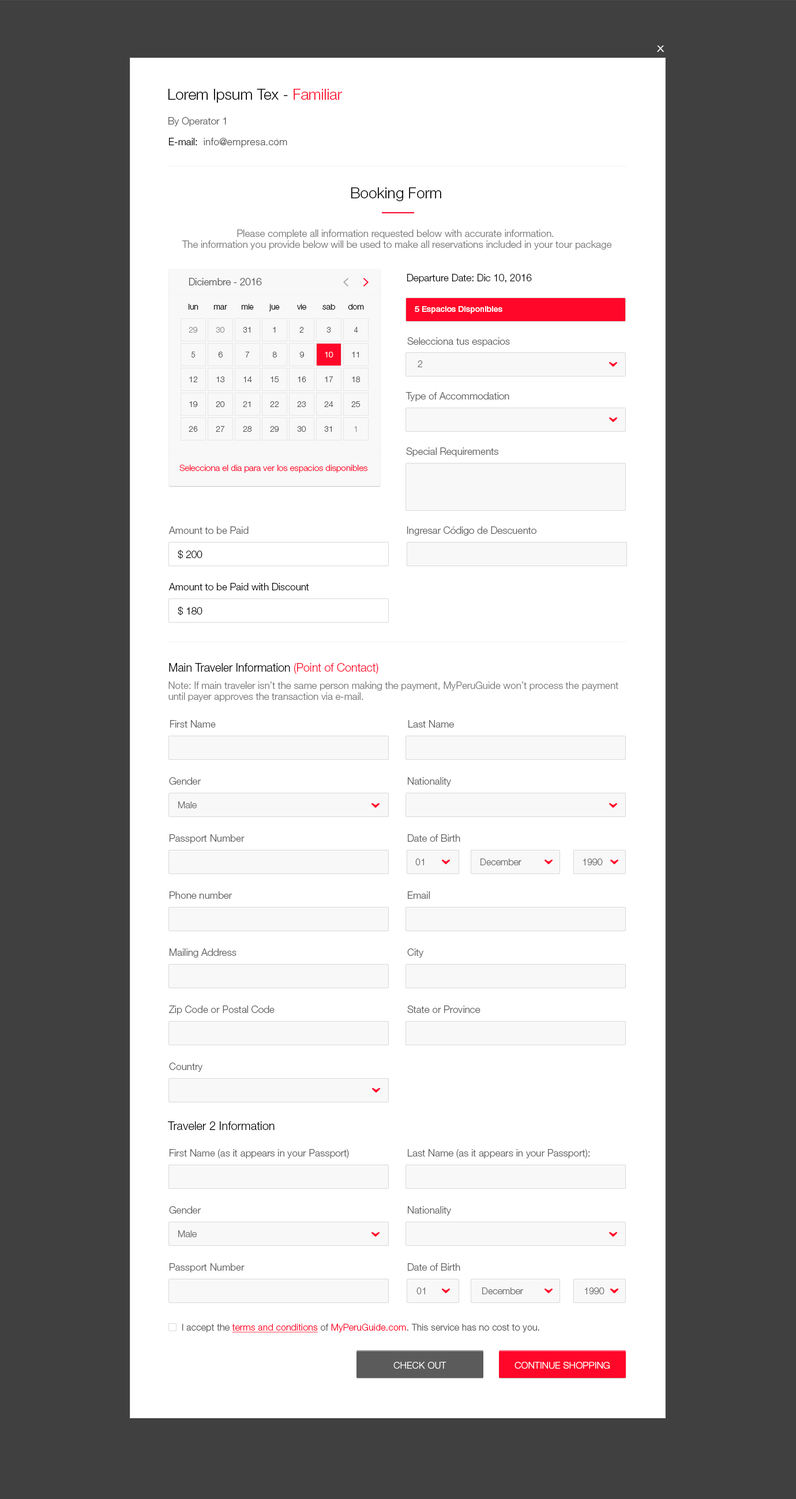
<style>
.page{position:relative;width:796px;height:1499px;background:#ffffff}
.page>*{position:absolute;margin:0}
.t1{font:12.1px "HelveticaNeueLTStd-Lt";color:#ffffff;scale:1.18 1}
.t2{font:15px "HelveticaNeueLTStd-Lt";color:#000000}
.t3{font:15px "HelveticaNeueLTStd-Lt";color:#ff0729}
.t4{font:9.8px "HelveticaNeueLTStd-Lt";color:#5b5b5b}
.t5{font:9.8px "HelveticaNeueLTStd-Lt";color:#000000}
.t6{font:9.8px "HelveticaLTStd-Light";color:#5b5b5b}
.t7{font:9.8px/11.2px "HelveticaNeueLTStd-Lt";color:#767676}
.t8{font:9.8px "HelveticaNeueLTStd-Lt";color:#525252}
.t9{font:8.1px "HelveticaNeueLTStd-Lt";color:#000000}
.t10{font:8.1px "HelveticaNeueLTStd-Md";color:#ffffff}
.t11{font:8.1px "HelveticaNeueLTStd-Lt";color:#909090}
.t12{font:8.1px "HelveticaNeueLTStd-Lt";color:#525252}
.t13{font:8.1px "HelveticaNeueLTStd-Lt";color:#ffffff}
.t14{font:9.2px "HelveticaNeueLTStd-Lt";color:#5b5b5b}
.t15{font:8.6px "HelveticaNeueLTStd-Lt";color:#ff0729}
.t16{font:11.5px "HelveticaNeueLTStd-Lt";color:#000000}
.t17{font:11.5px "HelveticaNeueLTStd-Lt";color:#ff0729}
.t18{font:9.9px/11px "HelveticaNeueLTStd-Lt";color:#767676}
.t19{font:9.2px "HelveticaNeueLTStd-Lt";letter-spacing:0.01em;color:#5b5b5b}
.t20{font:9.2px "HelveticaNeueLTStd-Lt";letter-spacing:0.01em;color:#ff0729;text-decoration:underline}
.t21{font:9.2px "HelveticaNeueLTStd-Lt";letter-spacing:0.01em;color:#ff0729}
.t22{font:9.2px "HelveticaNeueLTStd-Lt";letter-spacing:0.01em;color:#ffffff;text-transform:uppercase}
</style>
<div class="page">
<p class="t1" style="left:657px;top:46px;width:7px;height:6px">x</p>
<p class="t2" style="left:168px;top:89px;width:174px;height:14px">Lorem Ipsum Tex - <span class="t3">Familiar</span></p>
<p class="t4" style="left:168px;top:117px;width:58px;height:9px">By Operator 1</p>
<p class="t5" style="left:169px;top:138px;width:28px;height:7px">E-mail:</p>
<p class="t6" style="left:204px;top:138px;width:83px;height:10px">info@empresa.com</p>
<p class="t2" style="left:351px;top:187px;width:90px;height:14px">Booking Form</p>
<p class="t7" style="left:182px;top:229px;width:429px;height:21px;text-align:center">Please complete all information requested below with accurate information. <br>The information you provide below will be used to make all reservations included in your tour package</p>
<p class="t8" style="left:189px;top:278px;width:73px;height:7px">Diciembre - 2016</p>
<p class="t5" style="left:407px;top:274px;width:125px;height:9px">Departure Date: Dic 10, 2016</p>
<p class="t9" style="left:189px;top:304px;width:9px;height:6px">lun</p>
<p class="t9" style="left:214px;top:305px;width:13px;height:5px">mar</p>
<p class="t9" style="left:242px;top:304px;width:12px;height:6px">mie</p>
<p class="t9" style="left:269px;top:304px;width:11px;height:7px">jue</p>
<p class="t9" style="left:297px;top:304px;width:9px;height:6px">vie</p>
<p class="t9" style="left:322px;top:304px;width:13px;height:6px">sab</p>
<p class="t9" style="left:348px;top:304px;width:16px;height:6px">dom</p>
<p class="t10" style="left:414px;top:306px;width:88px;height:8px">5 Espacios Disponibles</p>
<p class="t11" style="left:189px;top:327px;width:9px;height:6px">29</p>
<p class="t11" style="left:216px;top:327px;width:9px;height:6px">30</p>
<p class="t12" style="left:243px;top:327px;width:7px;height:6px">31</p>
<p class="t12" style="left:273px;top:327px;width:3px;height:6px">1</p>
<p class="t12" style="left:299px;top:327px;width:5px;height:6px">2</p>
<p class="t12" style="left:326px;top:327px;width:5px;height:6px">3</p>
<p class="t12" style="left:354px;top:327px;width:4px;height:6px">4</p>
<p class="t4" style="left:407px;top:337px;width:103px;height:9px">Selecciona tus espacios</p>
<p class="t12" style="left:191px;top:352px;width:4px;height:5px">5</p>
<p class="t12" style="left:218px;top:352px;width:5px;height:5px">6</p>
<p class="t12" style="left:245px;top:352px;width:5px;height:5px">7</p>
<p class="t12" style="left:272px;top:352px;width:5px;height:5px">8</p>
<p class="t12" style="left:299px;top:352px;width:5px;height:5px">9</p>
<p class="t13" style="left:325px;top:352px;width:8px;height:5px">10</p>
<p class="t12" style="left:352px;top:352px;width:7px;height:5px">11</p>
<p class="t14" style="left:417px;top:360px;width:5px;height:7px;opacity:0.9">2</p>
<p class="t12" style="left:189px;top:376px;width:8px;height:6px">12</p>
<p class="t12" style="left:216px;top:376px;width:9px;height:6px">13</p>
<p class="t12" style="left:243px;top:376px;width:9px;height:6px">14</p>
<p class="t12" style="left:270px;top:376px;width:9px;height:6px">15</p>
<p class="t12" style="left:297px;top:376px;width:9px;height:6px">16</p>
<p class="t12" style="left:325px;top:376px;width:8px;height:6px">17</p>
<p class="t12" style="left:352px;top:376px;width:8px;height:6px">18</p>
<p class="t12" style="left:189px;top:401px;width:9px;height:6px">19</p>
<p class="t12" style="left:216px;top:401px;width:9px;height:6px">20</p>
<p class="t12" style="left:243px;top:401px;width:7px;height:6px">21</p>
<p class="t12" style="left:270px;top:401px;width:8px;height:6px">22</p>
<p class="t12" style="left:297px;top:401px;width:9px;height:6px">23</p>
<p class="t12" style="left:324px;top:401px;width:9px;height:6px">24</p>
<p class="t12" style="left:351px;top:401px;width:9px;height:6px">25</p>
<p class="t4" style="left:405px;top:392px;width:104px;height:9px">Type of Accommodation</p>
<p class="t12" style="left:189px;top:426px;width:9px;height:6px">26</p>
<p class="t12" style="left:216px;top:426px;width:9px;height:6px">27</p>
<p class="t12" style="left:243px;top:426px;width:9px;height:6px">28</p>
<p class="t12" style="left:270px;top:426px;width:9px;height:6px">29</p>
<p class="t12" style="left:297px;top:426px;width:9px;height:6px">30</p>
<p class="t12" style="left:324px;top:426px;width:7px;height:6px">31</p>
<p class="t11" style="left:354px;top:426px;width:3px;height:6px">1</p>
<p class="t4" style="left:406px;top:447px;width:92px;height:10px">Special Requirements</p>
<p class="t15" style="left:179px;top:465px;width:188px;height:8px">Selecciona el dia para ver los espacios disponibles</p>
<p class="t4" style="left:168px;top:526px;width:80px;height:8px">Amount to be Paid</p>
<p class="t4" style="left:407px;top:526px;width:129px;height:10px">Ingresar Código de Descuento</p>
<p class="t5" style="left:178px;top:549px;width:24px;height:10px">$ 200</p>
<p class="t5" style="left:168px;top:583px;width:141px;height:7px">Amount to be Paid with Discount</p>
<p class="t5" style="left:178px;top:606px;width:24px;height:10px">$ 180</p>
<p class="t16" style="left:169px;top:663px;width:209px;height:11px">Main Traveler Information <span class="t17">(Point of Contact)</span></p>
<p class="t18" style="left:168px;top:681px;width:450px;height:21px">Note: If main traveler isn’t the same person making the payment, MyPeruGuide won’t process the payment <br>until payer approves the transaction via e-mail.</p>
<p class="t4" style="left:170px;top:720px;width:46px;height:8px">First Name</p>
<p class="t4" style="left:408px;top:720px;width:46px;height:8px">Last Name</p>
<p class="t4" style="left:169px;top:777px;width:32px;height:8px">Gender</p>
<p class="t4" style="left:408px;top:777px;width:43px;height:9px">Nationality</p>
<p class="t14" style="left:178px;top:801px;width:19px;height:7px;opacity:0.9">Male</p>
<p class="t4" style="left:169px;top:834px;width:75px;height:9px">Passport Number</p>
<p class="t4" style="left:408px;top:834px;width:52px;height:8px">Date of Birth</p>
<p class="t14" style="left:415px;top:858px;width:9px;height:7px;opacity:0.9">01</p>
<p class="t14" style="left:480px;top:858px;width:42px;height:7px;opacity:0.9">December</p>
<p class="t14" style="left:582px;top:858px;width:20px;height:7px;opacity:0.9">1990</p>
<p class="t4" style="left:169px;top:891px;width:63px;height:8px">Phone number</p>
<p class="t4" style="left:408px;top:891px;width:21px;height:8px">Email</p>
<p class="t4" style="left:169px;top:948px;width:67px;height:10px">Mailing Address</p>
<p class="t4" style="left:407px;top:948px;width:16px;height:10px">City</p>
<p class="t4" style="left:169px;top:1005px;width:105px;height:10px">Zip Code or Postal Code</p>
<p class="t4" style="left:407px;top:1005px;width:73px;height:8px">State or Province</p>
<p class="t4" style="left:169px;top:1062px;width:33px;height:10px">Country</p>
<p class="t16" style="left:168px;top:1121px;width:106px;height:9px">Traveler 2 Information</p>
<p class="t4" style="left:169px;top:1149px;width:180px;height:9px">First Name (as it appears in your Passport)</p>
<p class="t4" style="left:408px;top:1149px;width:181px;height:9px">Last Name (as it appears in your Passport):</p>
<p class="t4" style="left:169px;top:1206px;width:32px;height:8px">Gender</p>
<p class="t4" style="left:408px;top:1206px;width:43px;height:9px">Nationality</p>
<p class="t14" style="left:178px;top:1230px;width:19px;height:7px;opacity:0.9">Male</p>
<p class="t4" style="left:169px;top:1263px;width:75px;height:9px">Passport Number</p>
<p class="t4" style="left:408px;top:1263px;width:52px;height:8px">Date of Birth</p>
<p class="t14" style="left:416px;top:1287px;width:9px;height:7px;opacity:0.9">01</p>
<p class="t14" style="left:482px;top:1287px;width:41px;height:7px;opacity:0.9">December</p>
<p class="t14" style="left:584px;top:1287px;width:20px;height:7px;opacity:0.9">1990</p>
<p class="t19" style="left:182px;top:1324px;width:357px;height:8px">I accept the <span class="t20">terms and conditions</span> of <span class="t21">MyPeruGuide.com</span>. This service has no cost to you.</p>
<p class="t22" style="left:393px;top:1362px;width:53px;height:7px">Check Out</p>
<p class="t22" style="left:514px;top:1362px;width:95px;height:7px">Continue Shopping</p>
</div>
